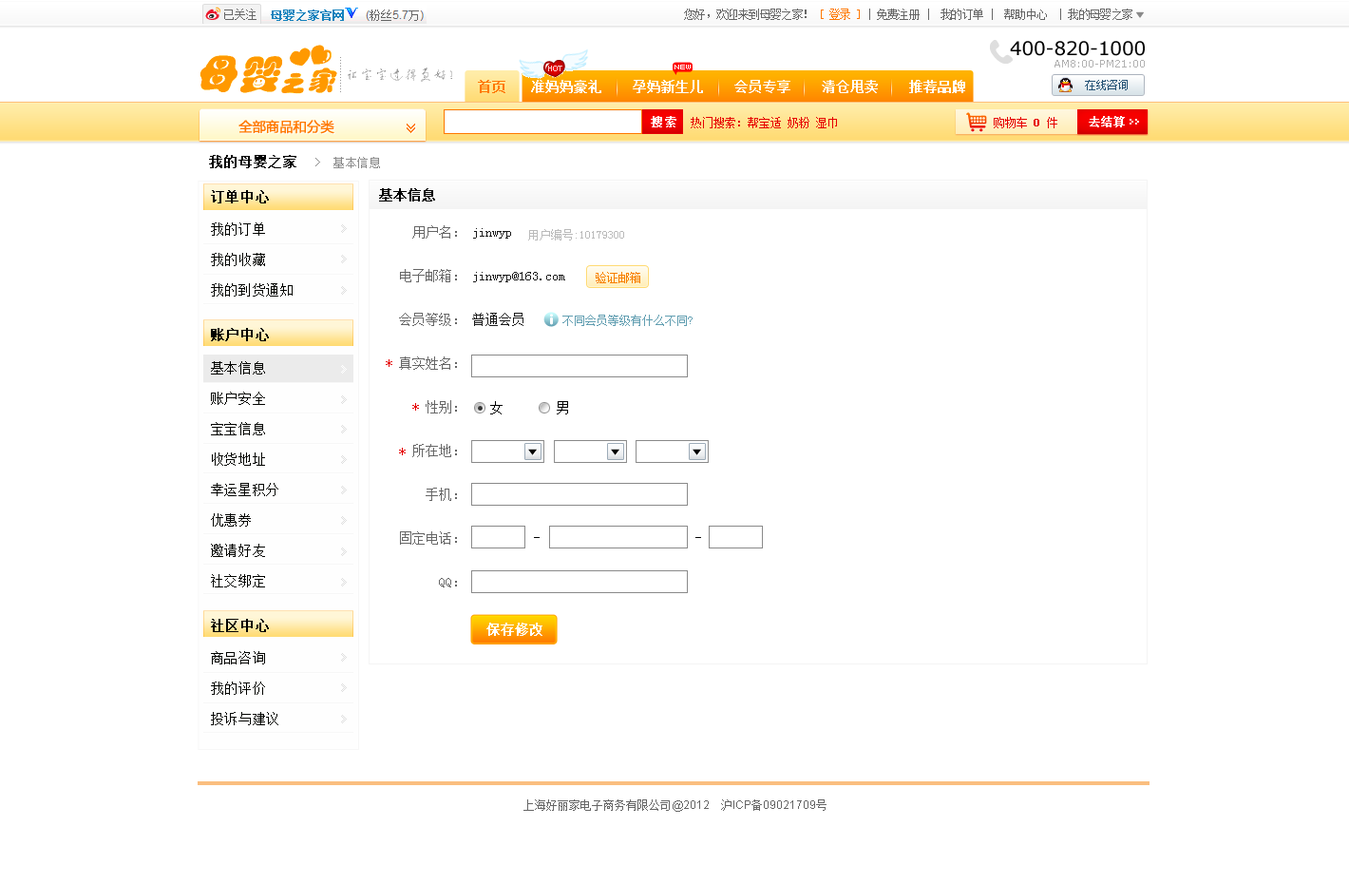
<style>
.page{position:relative;width:1349px;height:884px;background:#ffffff}
.page>*{position:absolute;margin:0}
.t1{font:11.4px "SimSun";letter-spacing:-0.05em;color:#666666}
.t2{font:11.4px "SimSun";letter-spacing:-0.05em;color:#ff7800}
.t3{font:19px "Verdana";letter-spacing:-0.01em;color:#000000}
.t4{font:5.7px "04b08";color:#ffffff}
.t5{font:10.5px "Verdana";color:#b1b1b1}
.t6{font:13.3px "SimSun";color:#ff7800;font-weight:bold}
.t7{font:13.3px "SimSun";color:#ffffff;font-weight:bold}
.t8{font:13.3px "MicrosoftYaHei";color:#ff7800;font-weight:bold}
.t9{font:11.4px "SimSun";color:#ff7800;font-weight:bold}
.t10{font:11.4px "SimSun";letter-spacing:0.2em;color:#ffffff;font-weight:bold}
.t11{font:11.4px "SimSun";color:#e60000}
.t12{font:11.4px "SimSun";color:#e60000;font-weight:bold}
.t13{font:11.4px "SimSun";color:#ffffff;font-weight:bold}
.t14{font:11.4px "SimSun";letter-spacing:0.05em;color:#898989}
.t15{font:13.3px "SimSun";letter-spacing:0.05em;color:#000000;font-weight:bold}
.t16{font:13.3px "SimSun";color:#000000;font-weight:bold}
.t17{font:13.3px/30.4px "SimSun";letter-spacing:0.05em;color:#020300}
.t18{font:13.3px/43.7px "SimSun";color:#666666}
.t19{font:13.3px/43.7px "SimSun";color:#1a1a1a}
.t20{font:11.4px "SimSun";color:#bababa}
.t21{font:11.4px "SimSun";color:#f78000}
.t22{font:11.4px "SimSun";color:#619eb1}
.t23{font:13.3px "SimSun";letter-spacing:0.05em;color:#020300;font-weight:bold}
.t24{font:13.3px "SimSun";color:#d00000}
.t25{font:13.3px "SimSun";color:#000000}
.t26{font:11.4px "SimSun";color:#666666}
.t27{font:11.4px "ArialMT";color:#666666}
</style>
<div class="page">
<p class="t1" style="left:684px;top:9px;width:449px;height:11px">您好，欢迎来到母婴之家！ <span class="t2">[ 登录 ]</span> | 免费注册 |  我的订单 |  帮助中心  | 我的母婴之家</p>
<p class="t3" style="left:1010px;top:41px;width:135px;height:15px">400-820-1000</p>
<p class="t4" style="left:675px;top:65px;width:16px;height:4px">NEW</p>
<p class="t5" style="left:1055px;top:60px;width:90px;height:7px">AM8:00-PM21:00</p>
<p class="t6" style="left:478px;top:80px;width:28px;height:13px">首页</p>
<p class="t7" style="left:531px;top:80px;width:434px;height:13px">准妈妈豪礼    孕妈新生儿    会员专享    清仓甩卖    推荐品牌</p>
<p class="t8" style="left:239px;top:120px;width:95px;height:14px">全部商品和分类</p>
<p class="t9" style="left:407px;top:124px;width:8px;height:5px;rotate:90deg">&gt;</p>
<p class="t10" style="left:651px;top:116px;width:26px;height:11px">搜索</p>
<p class="t11" style="left:691px;top:117px;width:146px;height:11px">热门搜索：帮宝适 奶粉 湿巾</p>
<p class="t11" style="left:994px;top:117px;width:64px;height:11px">购物车 <span class="t12">0 </span>件</p>
<p class="t13" style="left:1089px;top:116px;width:36px;height:11px">去结算</p>
<p class="t9" style="left:407px;top:127px;width:8px;height:6px;rotate:90deg">&gt;</p>
<p class="t14" style="left:209px;top:155px;width:171px;height:13px"><span class="t15">我的母婴之家  </span>&gt;  基本信息</p>
<p class="t15" style="left:211px;top:190px;width:58px;height:13px">订单中心</p>
<p class="t16" style="left:379px;top:188px;width:56px;height:13px">基本信息</p>
<p class="t17" style="left:211px;top:222px;width:82px;height:74px">我的订单<br>我的收藏<br>我的到货通知</p>
<p class="t18" style="left:399px;top:225px;width:58px;height:362px;text-align:right">用户名：<br>电子邮箱：<br>会员等级：<br>真实姓名：<br>性别：<br>所在地：<br>手机：<br>固定电话：<br>QQ：</p>
<p class="t19" style="left:472px;top:228px;width:93px;height:98px">jinwyp<br>jinwyp@163.com<br>普通会员</p>
<p class="t20" style="left:528px;top:229px;width:96px;height:11px">用户编号:10179300</p>
<p class="t21" style="left:596px;top:272px;width:44px;height:11px">验证邮箱</p>
<p class="t22" style="left:563px;top:315px;width:130px;height:11px">不同会员等级有什么不同?</p>
<p class="t23" style="left:211px;top:328px;width:58px;height:13px">账户中心</p>
<p class="t17" style="left:211px;top:361px;width:67px;height:226px">基本信息<br>账户安全<br>宝宝信息<br>收货地址<br>幸运星积分<br>优惠券<br>邀请好友<br>社交绑定</p>
<p class="t24" style="left:386px;top:359px;width:6px;height:8px">*</p>
<p class="t25" style="left:490px;top:401px;width:78px;height:13px">女        男</p>
<p class="t24" style="left:412px;top:403px;width:7px;height:8px">*</p>
<p class="t24" style="left:399px;top:448px;width:7px;height:7px">*</p>
<p class="t15" style="left:211px;top:619px;width:58px;height:13px">社区中心</p>
<p class="t7" style="left:487px;top:622px;width:56px;height:14px">保存修改</p>
<p class="t17" style="left:211px;top:651px;width:67px;height:74px">商品咨询<br>我的评价<br>投诉与建议</p>
<p class="t26" style="left:524px;top:799px;width:303px;height:13px">上海好丽家电子商务有限公司<span class="t27">@2012    </span>沪<span class="t27">ICP</span>备<span class="t27">09021709</span>号</p>
</div>
